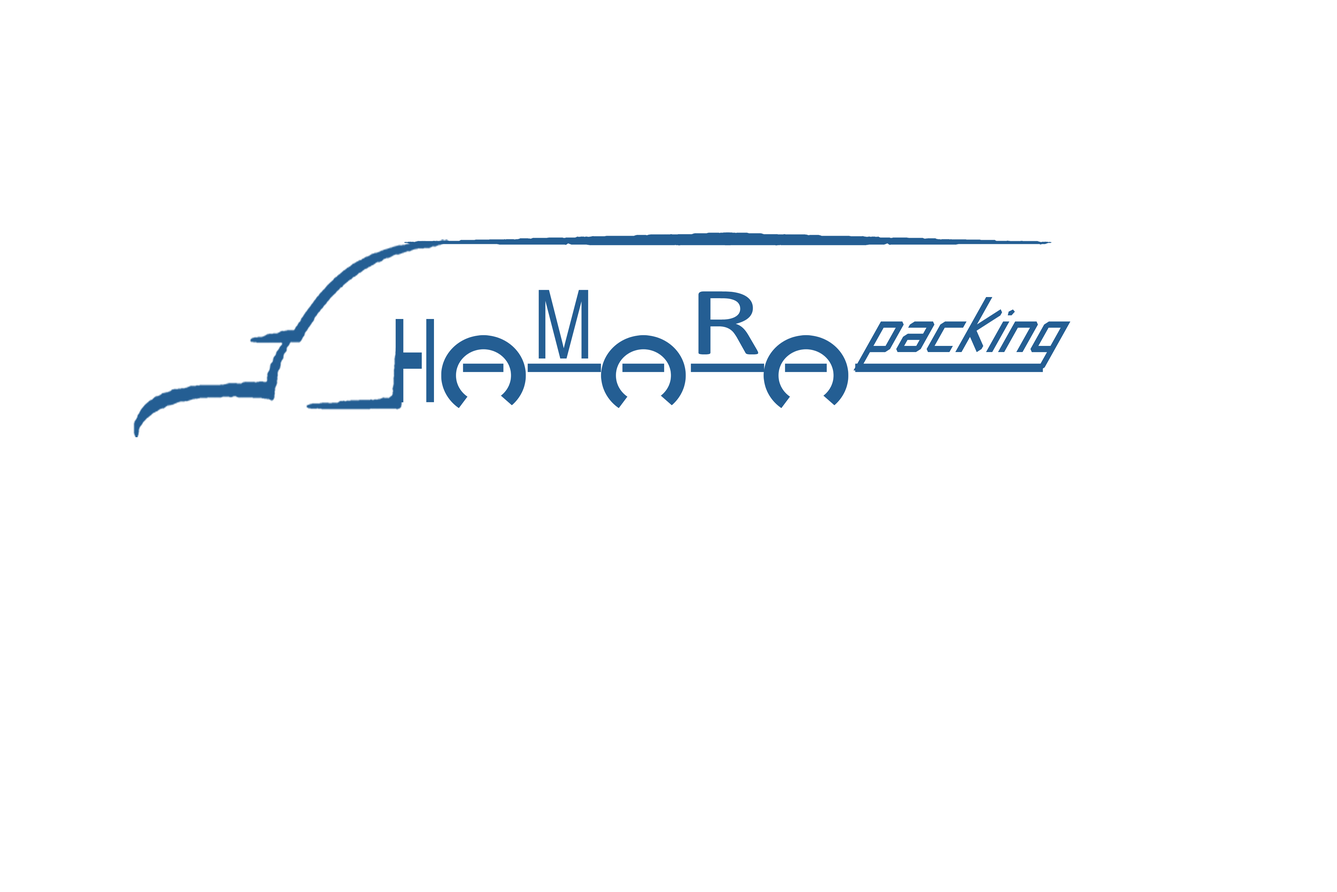
<style>
.page{position:relative;width:1337px;height:892px;background:#ffffff}
.page>*{position:absolute;margin:0}
.t1{font:95.4px "ArialMT";color:#245e93;scale:0.76 1}
.t2{font:99px "Calibri";color:#245e93;scale:1.43 1}
.t3{font:112px "Banana-Square";color:#245e93;scale:0.87 1}
.t4{font:118.3px "Android";color:#245e93;scale:0.46 1}
</style>
<div class="page">
<p class="t1" style="left:539px;top:290px;width:50px;height:68px">M</p>
<p class="t2" style="left:699px;top:291px;width:60px;height:63px">R</p>
<p class="t3" style="left:854px;top:297px;width:217px;height:73px">paCking</p>
<p class="t4" style="left:396px;top:319px;width:38px;height:83px">H</p>
</div>
